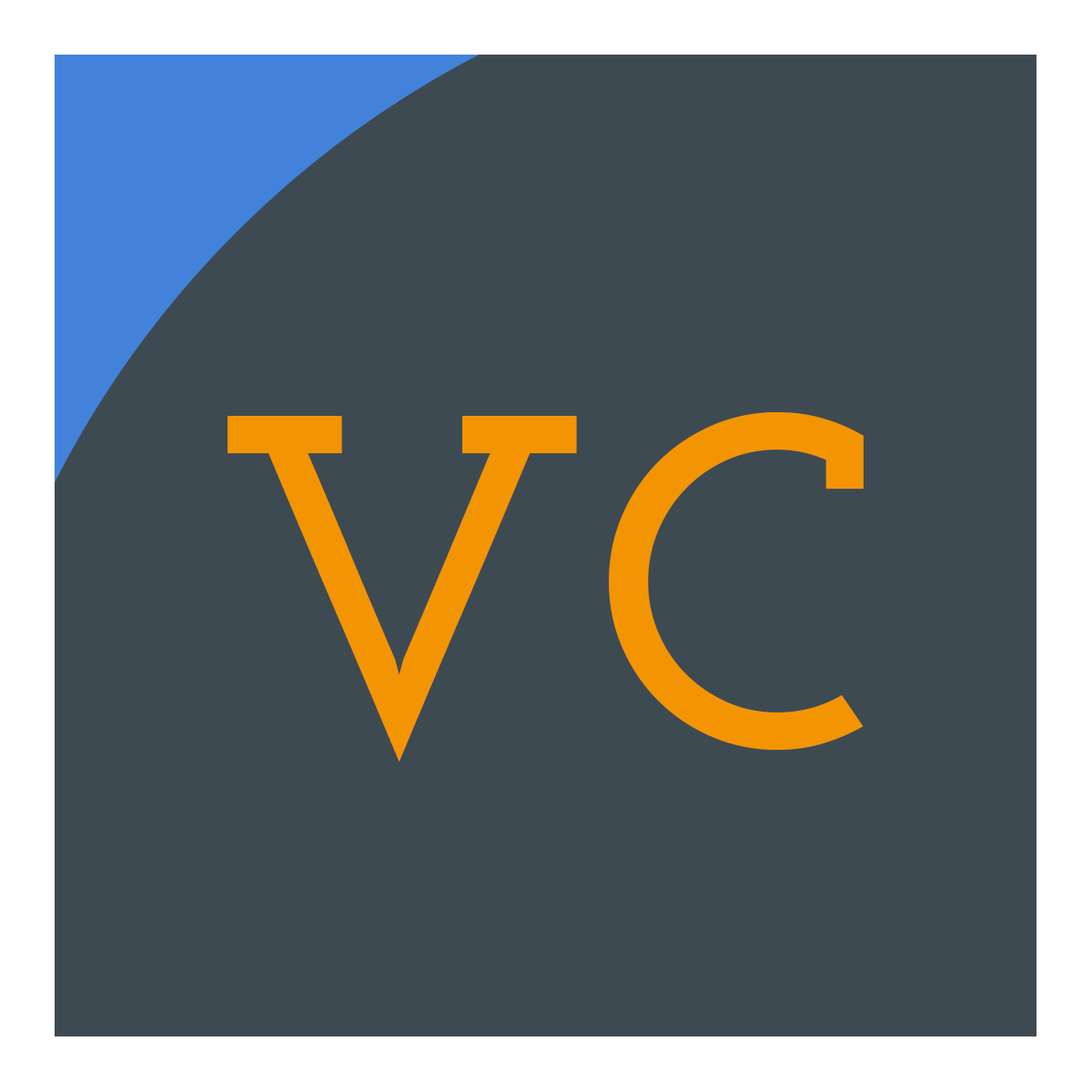
<style>
.page{position:relative;width:1092px;height:1092px;background:#3e4a51}
.page>*{position:absolute;margin:0}
.t1{font:471.3px "JosefinSlab-Bold";color:#f39502}
</style>
<div class="page">
<p class="t1" style="left:227px;top:412px;width:637px;height:350px">VC</p>
</div>
